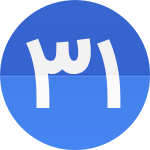
<style>
.page{position:relative;width:150px;height:150px;background:#ffffff}
.page>*{position:absolute;margin:0}
.t1{font:103.9px "Vazir-Bold-FD";color:#ffffff}
</style>
<div class="page">
<p class="t1" style="left:26px;top:38px;width:95px;height:70px">31</p>
</div>
